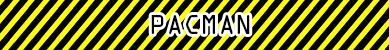
<style>
.page{position:relative;width:389px;height:50px;background:#000000}
.page>*{position:absolute;margin:0}
.t1{font:24px "OCRAStd";color:#000000}
</style>
<div class="page">
<p class="t1" style="left:151px;top:15px;width:99px;height:19px">PACMAN</p>
</div>
